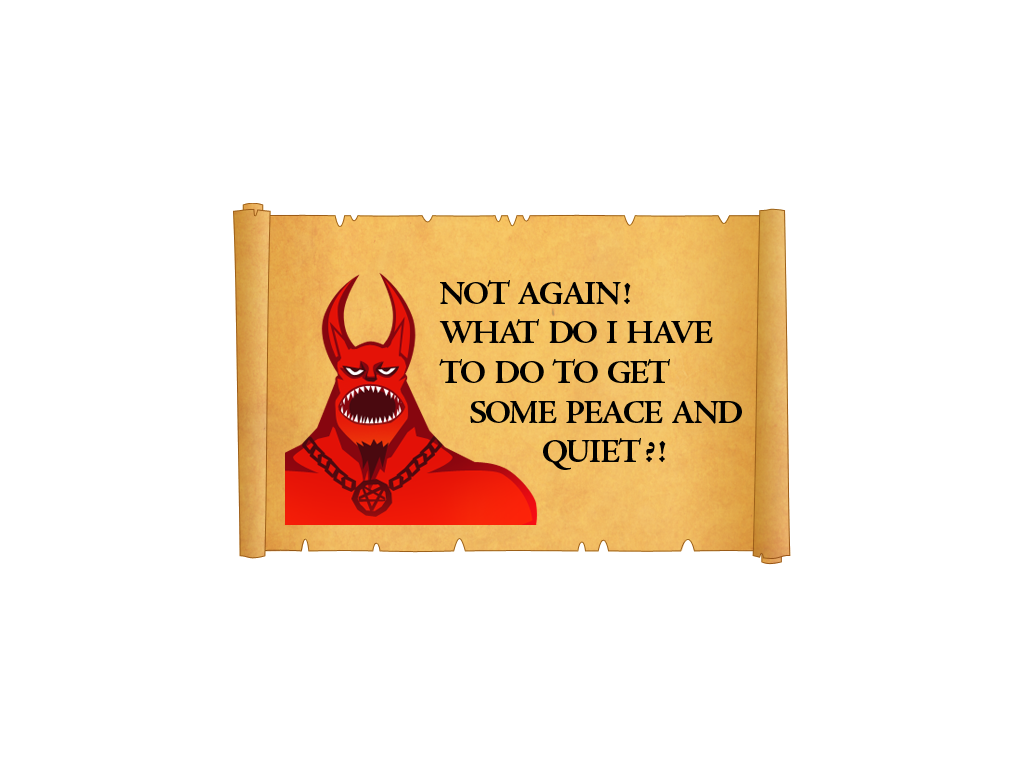
<style>
.page{position:relative;width:1024px;height:768px;background:#ffffff}
.page>*{position:absolute;margin:0}
.t1{font:33px "AJensonPro-Bold";letter-spacing:-0.06em;color:#000000}
</style>
<div class="page">
<p class="t1" style="left:439px;top:280px;width:303px;height:190px">NOT  AGAIN !<br>WHAT  DO  I  HAVE TO  DO  TO  GET<br>      SOME  PEACE  AND<br>                     QUIET ? !</p>
</div>
